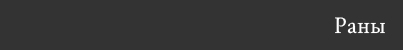
<style>
.page{position:relative;width:403px;height:50px;background:#333333}
.page>*{position:absolute;margin:0}
.t1{font:24px "CrimsonText-Regular";color:#ffffff}
</style>
<div class="page">
<p class="t1" style="left:335px;top:17px;width:50px;height:17px">Раны</p>
</div>
